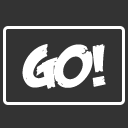
<style>
.page{position:relative;width:128px;height:128px;background:#333333}
.page>*{position:absolute;margin:0}
.t1{font:60px "FeastofFleshBB";color:#ffffff;font-weight:bold}
</style>
<div class="page">
<p class="t1" style="left:22px;top:44px;width:84px;height:45px">GO!</p>
</div>
